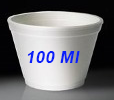
<style>
.page{position:relative;width:114px;height:100px}
.page>*{position:absolute;margin:0}
.t1{font:30px "Arial-BoldMT";color:#0a20f9;font-style:italic}
</style>
<div class="page">
<p class="t1" style="left:27px;top:51px;width:53px;height:12px">100 Ml</p>
</div>
